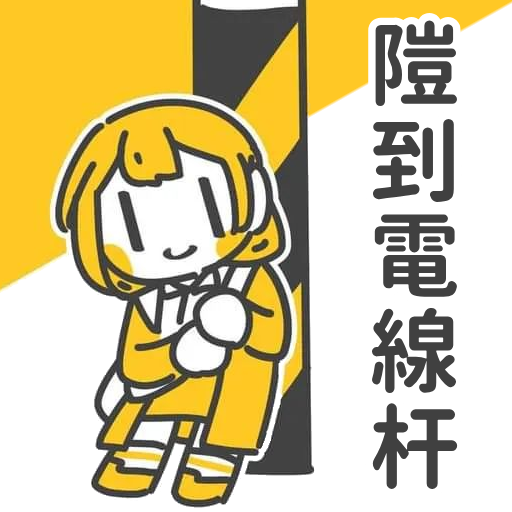
<style>
.page{position:relative;width:512px;height:512px;background:#ffffff}
.page>*{position:absolute;margin:0}
.t1{font:91.7px/95.7px "GenJyuuGothic-P-Bold";letter-spacing:-0.036em}
</style>
<div class="page">
<p class="t1" style="left:363px;top:12px;width:103px;height:485px;text-align:right">隑<br>到<br>電<br>線<br>杆</p>
</div>
